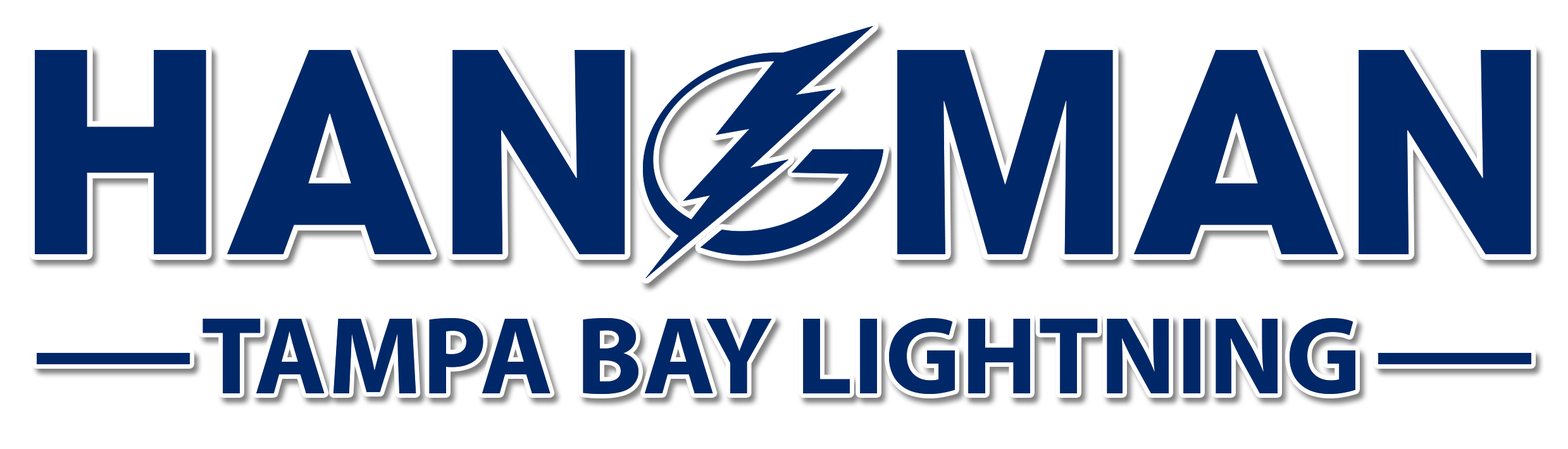
<style>
.page{position:relative;width:1568px;height:449px;background:#ffffff}
.page>*{position:absolute;margin:0}
.t1{font:275.9px "AvantGarde-Bold";color:#002868}
.t2{font:110.7px "MyriadPro-Bold";letter-spacing:0.005em;color:#002868}
</style>
<div class="page">
<p class="t1" style="left:35px;top:46px;width:1496px;height:213px">HANGMAN</p>
<p class="t1" style="left:35px;top:46px;width:1496px;height:213px">HANGMAN</p>
<p class="t2" style="left:202px;top:318px;width:1153px;height:76px">TAMPA BAY LIGHTNING</p>
<p class="t2" style="left:202px;top:318px;width:1153px;height:76px">TAMPA BAY LIGHTNING</p>
</div>
